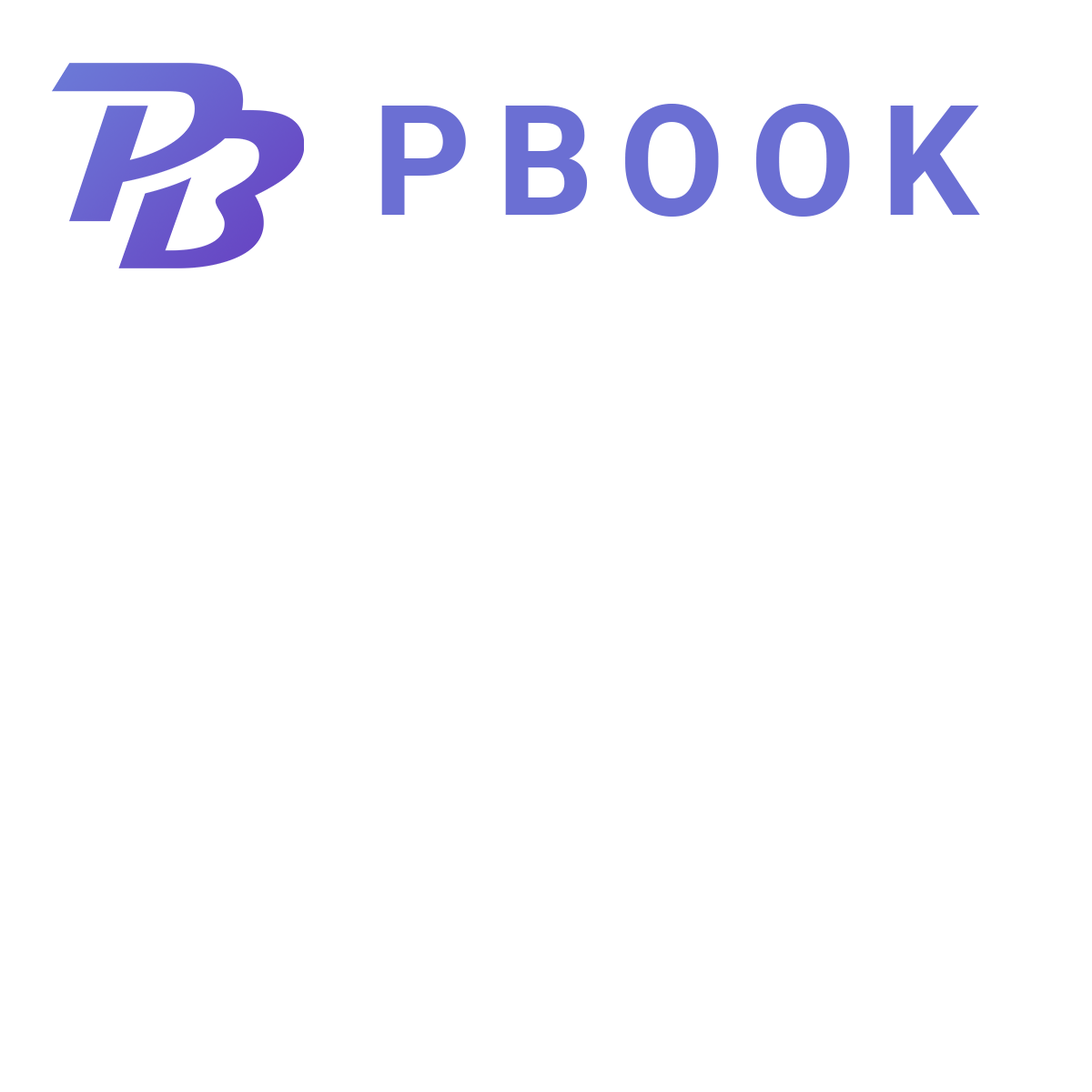
<style>
.page{position:relative;width:1092px;height:1092px;background:#ffffff}
.page>*{position:absolute;margin:0}
.t1{font:153.8px "Roboto-Bold";letter-spacing:0.16em;color:#6b6fd3}
</style>
<div class="page">
<p class="t1" style="left:381px;top:104px;width:599px;height:113px">PBOOK</p>
</div>
